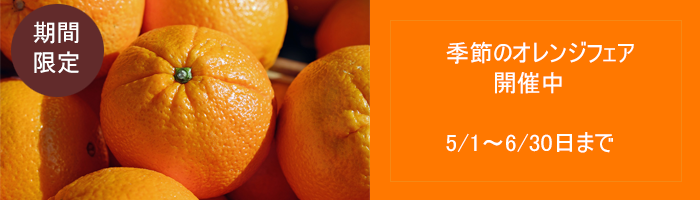
<style>
.page{position:relative;width:700px;height:200px;background:#ff7800}
.page>*{position:absolute;margin:0}
.t1{font:24px/30px "MS-UIGothic";letter-spacing:-0.005em;color:#ffffff}
.t2{font:24px/30px "MS-UIGothic";letter-spacing:0.1em;color:#ffffff}
</style>
<div class="page">
<p class="t1" style="left:33px;top:21px;width:46px;height:53px"><span class="t2"> </span>期間<br> 限定</p>
<p class="t1" style="left:446px;top:41px;width:188px;height:112px">季節のオレンジフェア<br>　　　開催中<br><br>5/1～6/30日まで</p>
</div>
